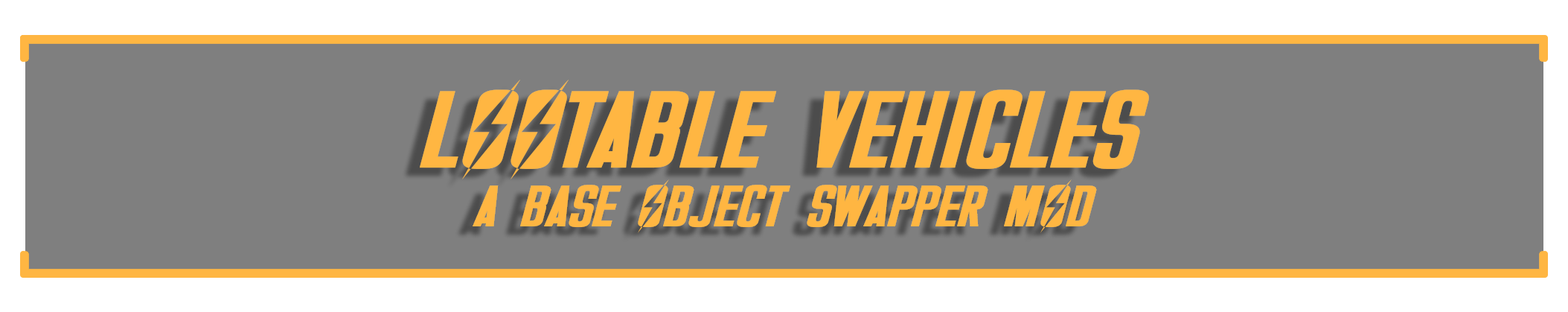
<style>
.page{position:relative;width:1568px;height:312px;background:#7f7f7f}
.page>*{position:absolute;margin:0}
.t1{font:111.3px "Overseer-Italic";color:#ffb642;text-transform:uppercase}
.t2{font:59.6px "Overseer-Italic";color:#ffb642;text-transform:uppercase}
</style>
<div class="page">
<p class="t1" style="left:420px;top:80px;width:729px;height:99px">lootable vehicles</p>
<p class="t2" style="left:473px;top:179px;width:624px;height:54px">a base object swapper mod</p>
</div>
